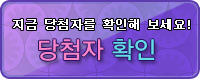
<style>
.page{position:relative;width:200px;height:79px}
.page>*{position:absolute;margin:0}
.t1{font:12px "Dotum";letter-spacing:0.02em;color:#ffffff;font-weight:bold}
.t2{font:24px "YDIYGO330";color:#fa85c7}
.t3{font:24px "YDIYGO330";color:#63dce7}
</style>
<div class="page">
<p class="t1" style="left:13px;top:19px;width:177px;height:11px">지금 당첨자를 확인해 보세요!</p>
<p class="t2" style="left:39px;top:39px;width:116px;height:22px">당첨자 <span class="t3">확인</span></p>
</div>
